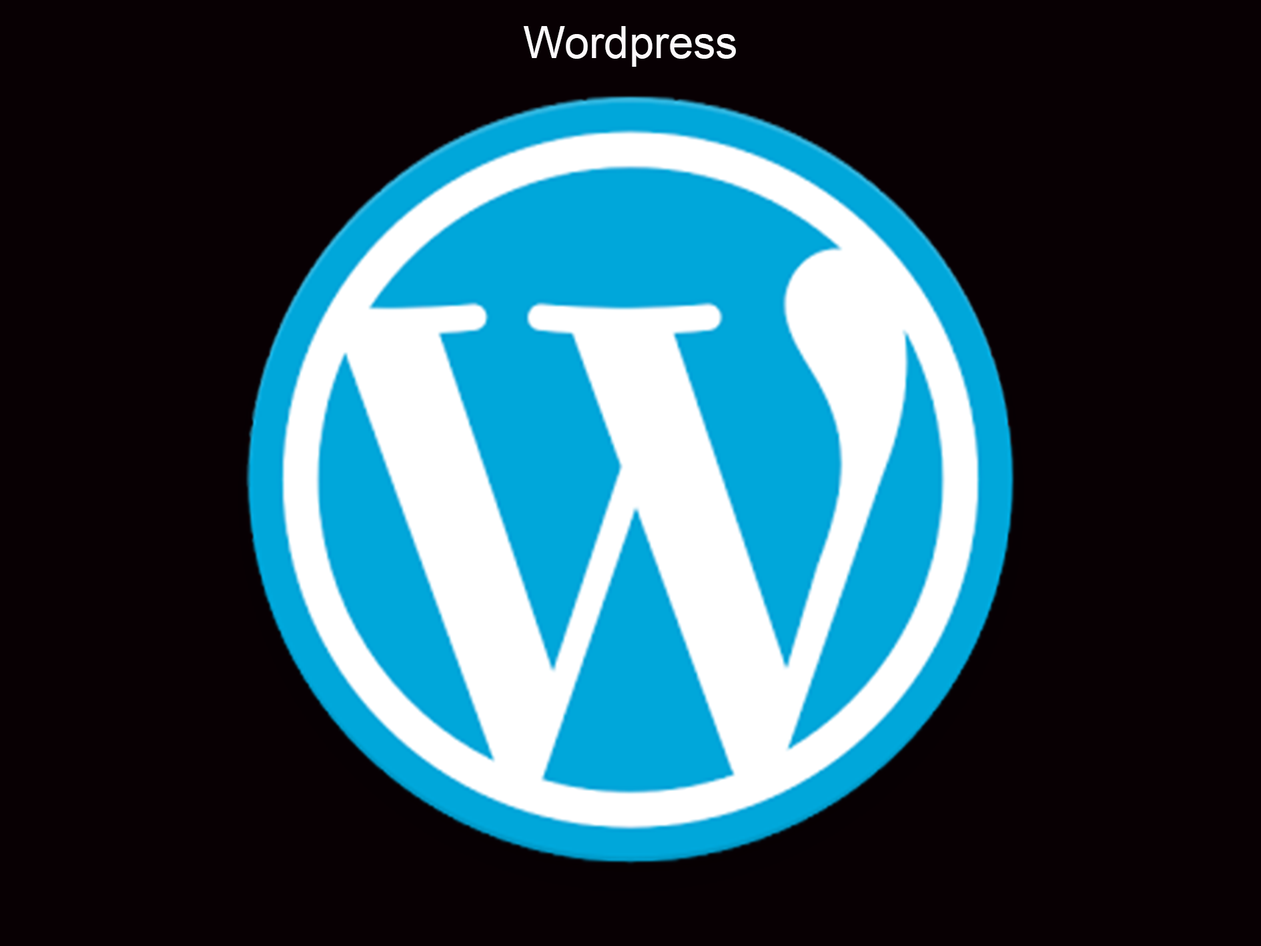
<style>
.page{position:relative;width:1261px;height:946px;background:#080003}
.page>*{position:absolute;margin:0}
.t1{font:44.5px "ArialMT";color:#fcf9fb}
</style>
<div class="page">
<p class="t1" style="left:523px;top:26px;width:213px;height:41px">Wordpress</p>
</div>
